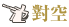
<style>
.page{position:relative;width:69px;height:27px;background:#ffffff}
.page>*{position:absolute;margin:0}
.t1{font:18px "RyuminPr6N-ExBold";color:#af9441}
</style>
<div class="page">
<p class="t1" style="left:32px;top:4px;width:35px;height:18px">對空</p>
</div>
